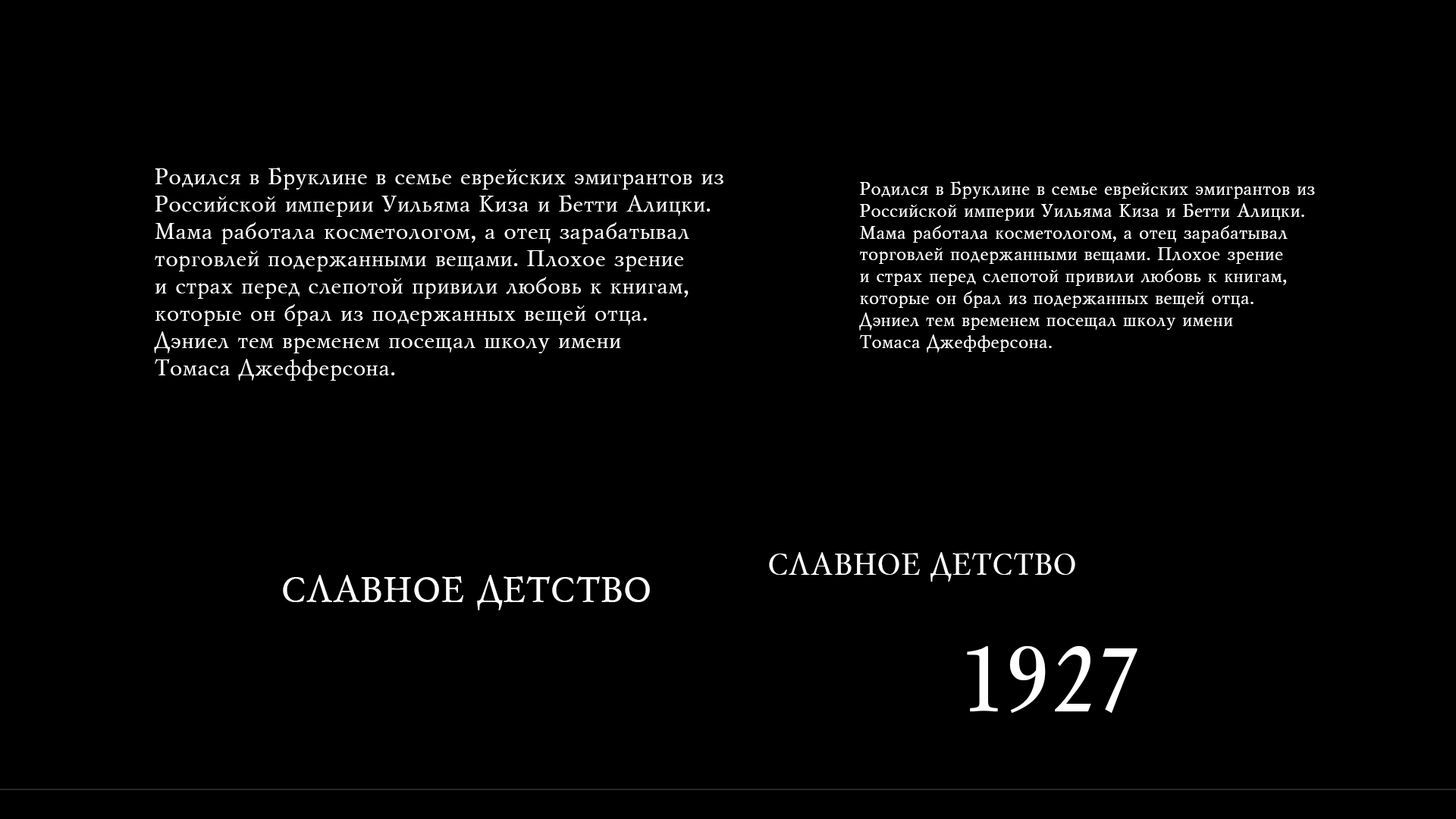
<style>
.page{position:relative;width:1456px;height:819px;background:#000000}
.page>*{position:absolute;margin:0}
.t1{font:22.7px "MyslCyrillic";color:#ffffff}
.t2{font:18.2px "MyslCyrillic";color:#ffffff}
.t3{font:30.3px "MyslCyrillic";color:#ffffff}
.t4{font:36.4px "MyslCyrillic";color:#ffffff}
.t5{font:91px "MyslCyrillic";color:#ffffff}
</style>
<div class="page">
<p class="t1" style="left:154px;top:168px;width:569px;height:213px">Родился в Бруклине в семье еврейских эмигрантов из<br>Российской империи Уильяма Киза и Бетти Алицки.<br>Мама работала косметологом, а отец зарабатывал <br>торговлей подержанными вещами. Плохое зрение <br>и страх перед слепотой привили любовь к книгам, <br>которые он брал из подержанных вещей отца. <br>Дэниел тем временем посещал школу имени <br>Томаса Джефферсона.</p>
<p class="t2" style="left:859px;top:181px;width:456px;height:172px">Родился в Бруклине в семье еврейских эмигрантов из<br>Российской империи Уильяма Киза и Бетти Алицки. <br>Мама работала косметологом, а отец зарабатывал <br>торговлей подержанными вещами. Плохое зрение <br>и страх перед слепотой привили любовь к книгам, <br>которые он брал из подержанных вещей отца. <br>Дэниел тем временем посещал школу имени <br>Томаса Джефферсона.</p>
<p class="t3" style="left:769px;top:552px;width:306px;height:30px">СЛАВНОЕ ДЕТСТВО</p>
<p class="t4" style="left:283px;top:575px;width:367px;height:35px">СЛАВНОЕ ДЕТСТВО</p>
<p class="t5" style="left:967px;top:646px;width:170px;height:67px">1927</p>
</div>
